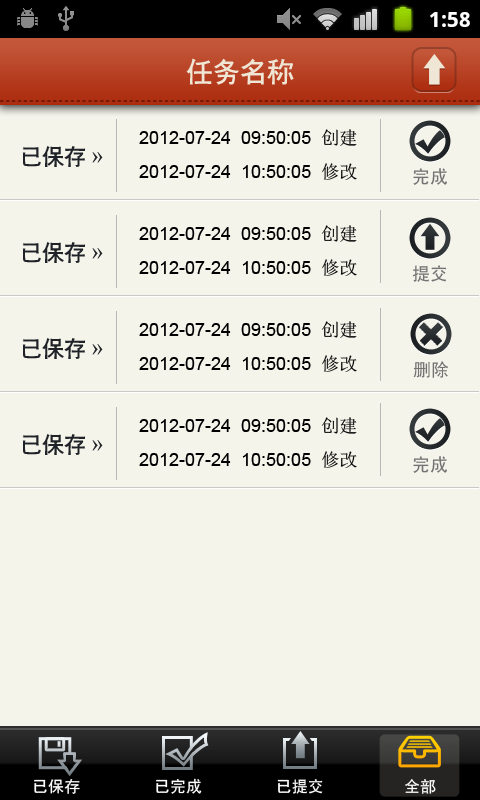
<style>
.page{position:relative;width:480px;height:800px;background:#f5f4eb}
.page>*{position:absolute;margin:0}
.t1{font:27px "CTCuHeiSJ";color:#efe6d6}
.t2{font:18px "ArialMT";color:#000000}
.t3{font:18px "SimSun";color:#000000}
.t4{font:22px "CTCuHeiSJ";color:#1f2327}
.t5{font:22px "SimSun";color:#1f2327}
.t6{font:18px "SimHei";color:#747272}
.t7{font:16px "SimHei";color:#ffffff}
</style>
<div class="page">
<p class="t1" style="left:186px;top:58px;width:108px;height:27px">任务名称</p>
<p class="t2" style="left:139px;top:129px;width:218px;height:17px">2012-07-24  09:50:05  <span class="t3">创建</span></p>
<p class="t4" style="left:22px;top:146px;width:81px;height:21px">已保存 <span class="t5">»</span></p>
<p class="t2" style="left:139px;top:163px;width:218px;height:17px">2012-07-24  10:50:05  <span class="t3">修改</span></p>
<p class="t6" style="left:413px;top:168px;width:34px;height:17px">完成</p>
<p class="t2" style="left:139px;top:225px;width:218px;height:17px">2012-07-24  09:50:05  <span class="t3">创建</span></p>
<p class="t4" style="left:22px;top:242px;width:81px;height:21px">已保存 <span class="t5">»</span></p>
<p class="t2" style="left:139px;top:259px;width:218px;height:17px">2012-07-24  10:50:05  <span class="t3">修改</span></p>
<p class="t6" style="left:412px;top:265px;width:35px;height:17px">提交</p>
<p class="t2" style="left:139px;top:321px;width:218px;height:17px">2012-07-24  09:50:05  <span class="t3">创建</span></p>
<p class="t4" style="left:22px;top:338px;width:81px;height:21px">已保存 <span class="t5">»</span></p>
<p class="t2" style="left:139px;top:355px;width:218px;height:17px">2012-07-24  10:50:05  <span class="t3">修改</span></p>
<p class="t6" style="left:413px;top:361px;width:35px;height:17px">删除</p>
<p class="t2" style="left:139px;top:417px;width:218px;height:17px">2012-07-24  09:50:05  <span class="t3">创建</span></p>
<p class="t4" style="left:22px;top:434px;width:81px;height:21px">已保存 <span class="t5">»</span></p>
<p class="t2" style="left:139px;top:451px;width:218px;height:17px">2012-07-24  10:50:05  <span class="t3">修改</span></p>
<p class="t6" style="left:413px;top:456px;width:34px;height:17px">完成</p>
<p class="t7" style="left:34px;top:779px;width:46px;height:15px">已保存</p>
<p class="t7" style="left:156px;top:778px;width:46px;height:16px">已完成</p>
<p class="t7" style="left:277px;top:779px;width:46px;height:15px">已提交</p>
<p class="t7" style="left:405px;top:779px;width:31px;height:15px">全部</p>
</div>
